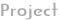
<style>
.page{position:relative;width:60px;height:20px;background:#ffffff}
.page>*{position:absolute;margin:0}
.t1{font:15.9px "ArchitecturePlain";color:#aaaaaa;scale:1.8 1}
</style>
<div class="page">
<p class="t1" style="left:1px;top:2px;width:57px;height:18px">Project</p>
</div>
